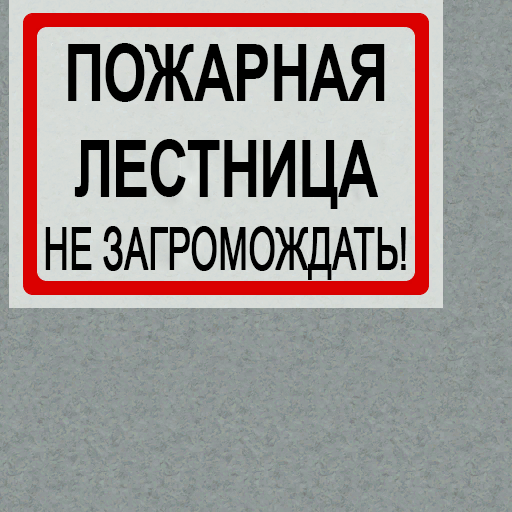
<style>
.page{position:relative;width:512px;height:512px}
.page>*{position:absolute;margin:0}
.t1{font:79px/96px "Arial-BoldMT";letter-spacing:-0.02em;color:#000000;scale:0.71 1}
.t2{font:58px "ArialMT";letter-spacing:-0.02em;color:#000000;font-weight:bold;scale:0.61 1}
</style>
<div class="page">
<p class="t1" style="left:68px;top:43px;width:317px;height:166px;text-align:center">ПОЖАРНАЯ<br>ЛЕСТНИЦА</p>
<p class="t2" style="left:45px;top:226px;width:361px;height:54px">НЕ ЗАГРОМОЖДАТЬ!</p>
</div>
